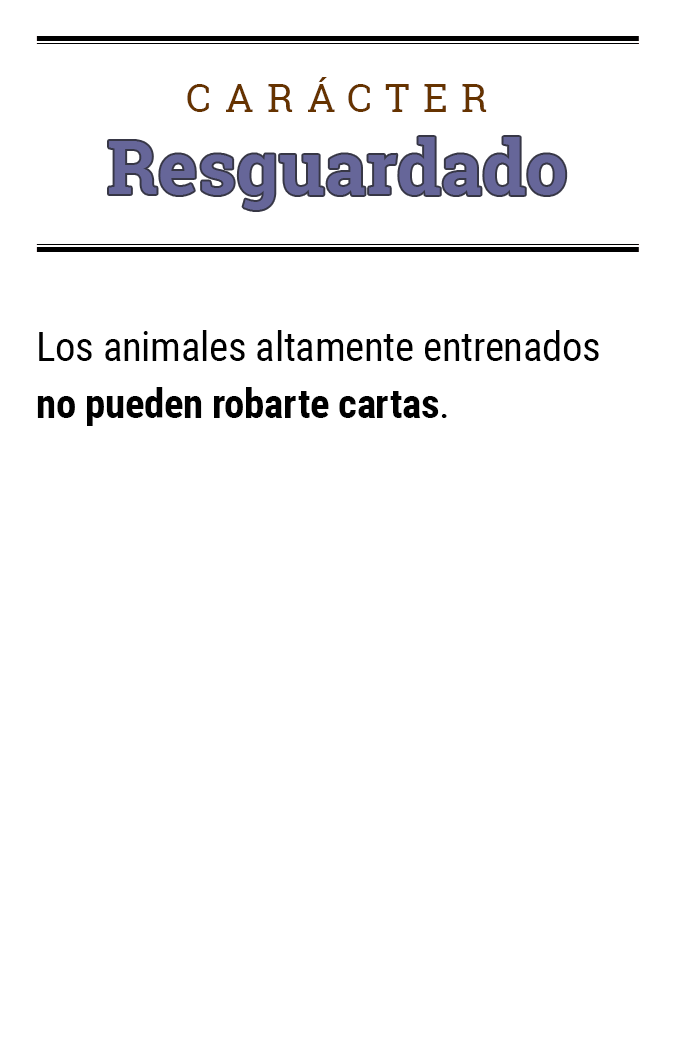
<style>
.page{position:relative;width:675px;height:1050px;background:#ffffff}
.page>*{position:absolute;margin:0}
.t1{font:39.2px "RobotoSlab-Regular";letter-spacing:0.34em;color:#663300}
.t2{font:74.5px "RobotoSlab-Bold";color:#666699}
.t3{font:41.1px/57.1px "RobotoCondensed-Regular";letter-spacing:-0.01em;color:#000000}
.t4{font:41.1px/57.1px "RobotoCondensed-Bold";letter-spacing:-0.01em;color:#000000}
</style>
<div class="page">
<p class="t1" style="left:187px;top:77px;width:300px;height:35px">CARÁCTER</p>
<p class="t2" style="left:109px;top:137px;width:457px;height:73px">Resguardado</p>
<p class="t3" style="left:37px;top:330px;width:562px;height:96px">Los animales altamente entrenados <span class="t4">no pueden robarte cartas</span>.</p>
</div>
